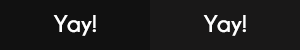
<style>
.page{position:relative;width:300px;height:50px;background:#191818}
.page>*{position:absolute;margin:0}
.t1{font:24px "Champagne&Limousines-Bold";letter-spacing:0.02em;color:#ffffff}
</style>
<div class="page">
<p class="t1" style="left:53px;top:15px;width:43px;height:21px">Yay!</p>
<p class="t1" style="left:203px;top:15px;width:43px;height:21px">Yay!</p>
</div>
